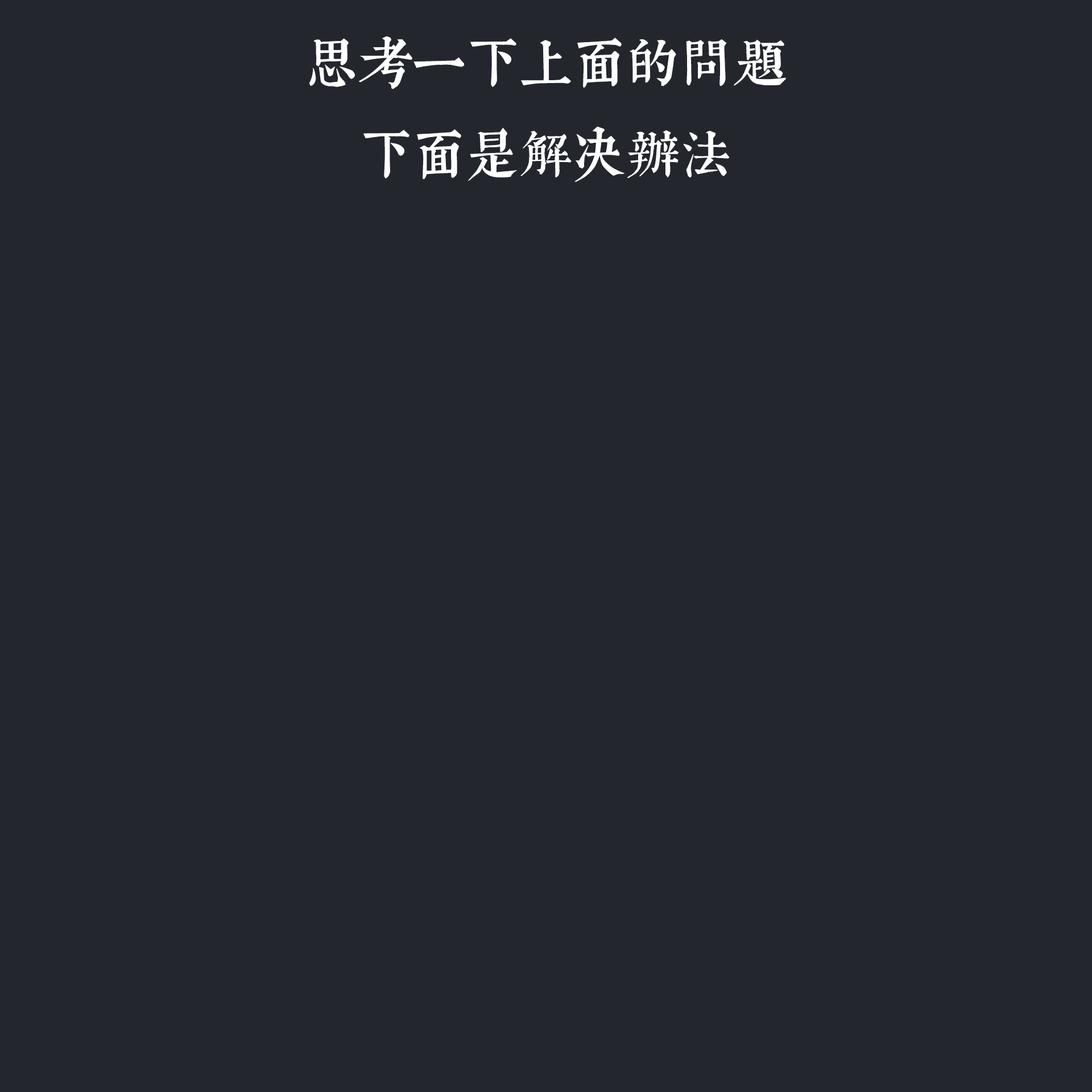
<style>
.page{position:relative;width:1092px;height:1092px;background:#23272d}
.page>*{position:absolute;margin:0}
.t1{font:53.5px/91.6px "WenYue_GuDianMingChaoTi_JRFC";color:#ffffff}
</style>
<div class="page">
<p class="t1" style="left:309px;top:36px;width:477px;height:146px;text-align:center">思考一下上面的问题<br>下面是解决办法</p>
</div>
